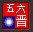
<style>
.page{position:relative;width:33px;height:32px;background:#f20000}
.page>*{position:absolute;margin:0}
.t1{font:10.4px "SimSun";color:#ffffff}
.t2{font:11.7px "SimSun";color:#ffffff}
</style>
<div class="page">
<p class="t1" style="left:7px;top:4px;width:18px;height:9px">五六</p>
<p class="t2" style="left:16px;top:15px;width:11px;height:12px">晋</p>
</div>
